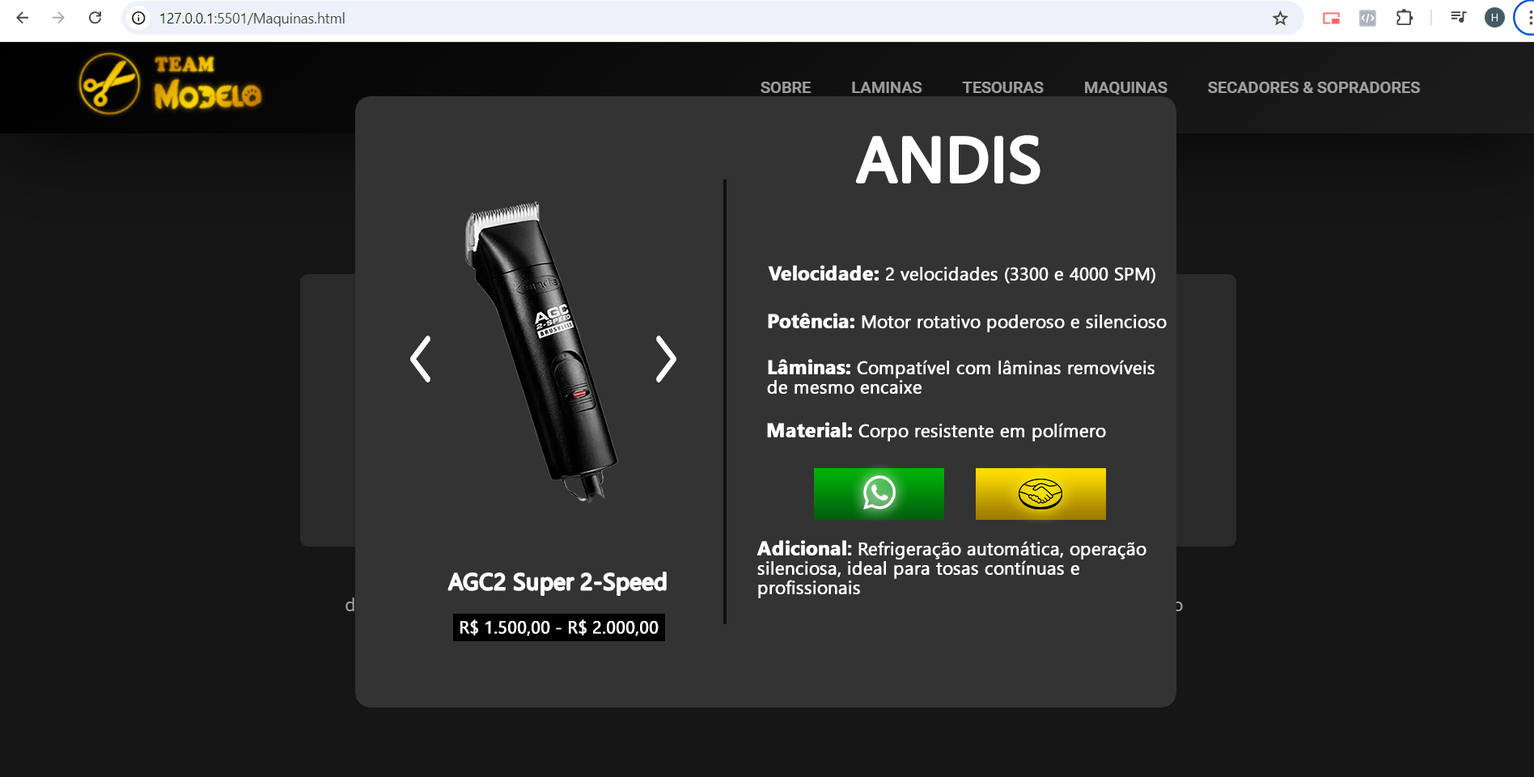
<style>
.page{position:relative;width:1534px;height:777px;background:#161616}
.page>*{position:absolute;margin:0}
.t1{font:62.1px "SegoeUI";color:#ffffff;font-weight:bold}
.t2{font:18px "SegoeUI";color:#ffffff;font-weight:bold}
.t3{font:19.6px "SegoeUI-Bold";color:#ffffff;font-weight:bold}
.t4{font:18px/19.4px "SegoeUI";color:#ffffff;font-weight:bold}
.t5{font:19.6px/19.4px "SegoeUI-Bold";color:#ffffff;font-weight:bold}
.t6{font:19.6px/19.4px "SegoeUI-Semibold";color:#ffffff;font-weight:bold}
.t7{font:22.9px "SegoeUI";color:#ffffff;font-weight:bold}
.t8{font:17.2px "SegoeUI";color:#ffffff;font-weight:bold}
.t9{font:17.2px "SegoeUI-Bold";color:#000000;font-weight:bold}
</style>
<div class="page">
<p class="t1" style="left:857px;top:137px;width:182px;height:46px">ANDIS</p>
<p class="t2" style="left:768px;top:265px;width:387px;height:19px"><span class="t3">Velocidade: </span>2 velocidades (3300 e 4000 SPM)</p>
<p class="t2" style="left:768px;top:313px;width:399px;height:19px"><span class="t3">Potência: </span>Motor rotativo poderoso e silencioso</p>
<p class="t4" style="left:767px;top:359px;width:387px;height:35px"><span class="t5">Lâminas: </span>Compatível com lâminas removíveis de mesmo encaixe</p>
<p class="t2" style="left:767px;top:422px;width:339px;height:20px"><span class="t3">Material: </span>Corpo resistente em polímero</p>
<p class="t4" style="left:756px;top:540px;width:390px;height:59px"><span class="t5">Adicional</span><span class="t6">: </span>Refrigeração automática, operação silenciosa, ideal para tosas contínuas e profissionais</p>
<p class="t7" style="left:448px;top:573px;width:218px;height:22px">AGC2 Super 2-Speed</p>
<p class="t8" style="left:460px;top:620px;width:199px;height:17px"><span class="t9"><br><br></span>R$ 1.500,00 - R$ 2.000,00</p>
</div>
